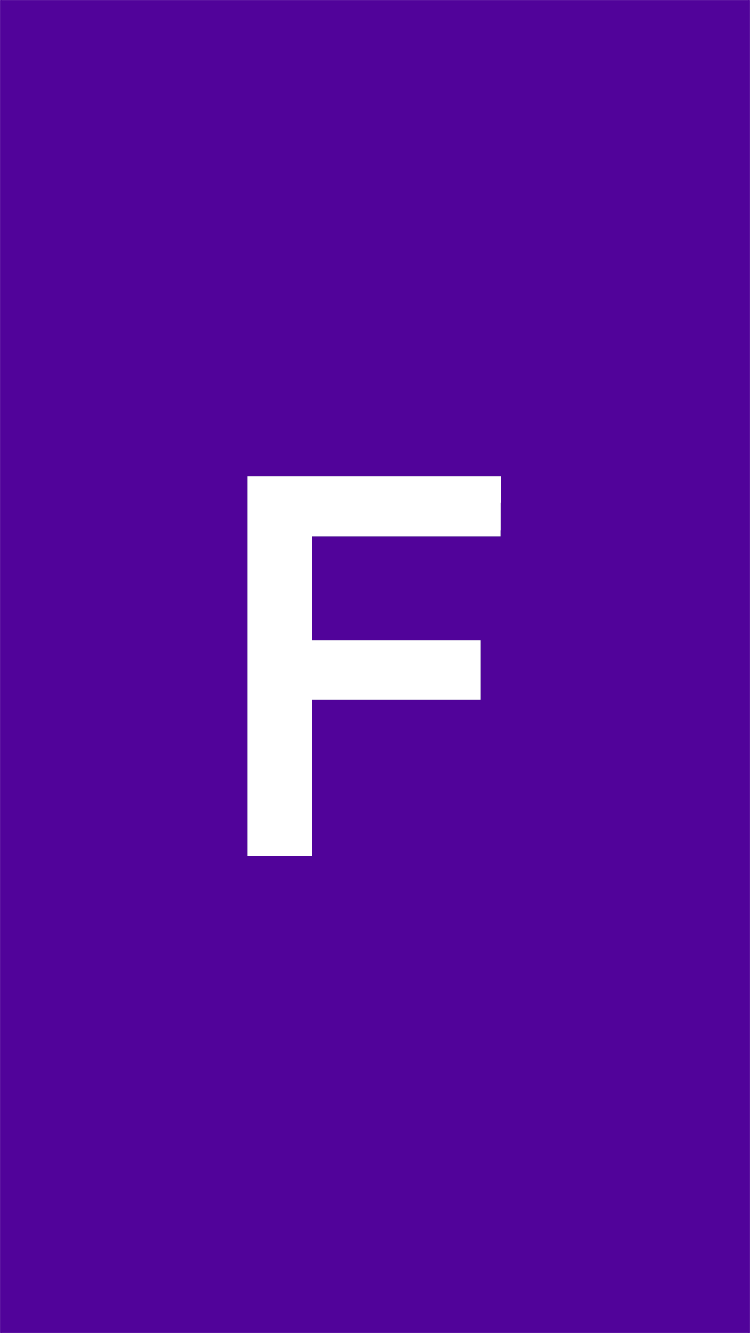
<style>
.page{position:relative;width:750px;height:1333px;background:#51039a}
.page>*{position:absolute;margin:0}
.t1{font:543.3px "Montserrat-Regular";color:#ffffff}
</style>
<div class="page">
<p class="t1" style="left:247px;top:476px;width:254px;height:380px">F</p>
</div>
